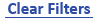
<style>
.page{position:relative;width:98px;height:19px;background:#ffffff}
.page>*{position:absolute;margin:0}
.t1{font:17px "Calibri-Bold";color:#2f4da7}
</style>
<div class="page">
<p class="t1" style="left:8px;top:2px;width:83px;height:12px">Clear Filters</p>
</div>
